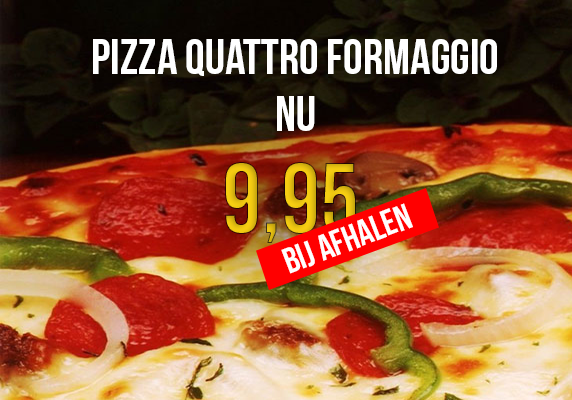
<style>
.page{position:relative;width:572px;height:400px}
.page>*{position:absolute;margin:0}
.t1{font:50px "BebasNeue";color:#ffffff}
.t2{font:100px "BebasNeue"}
.t3{font:36px "BebasNeue";color:#ffffff}
</style>
<div class="page">
<p class="t1" style="left:93px;top:39px;width:404px;height:37px">Pizza Quattro Formaggio</p>
<p class="t1" style="left:277px;top:96px;width:38px;height:35px">nu</p>
<p class="t2" style="left:225px;top:162px;width:131px;height:81px">9,95</p>
<p class="t3" style="left:281px;top:203px;width:132px;height:71px;rotate:-21deg">bij afhalen</p>
</div>
